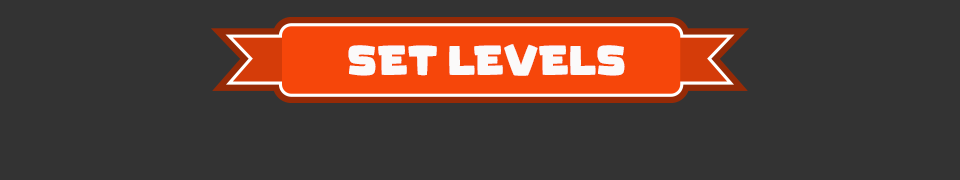
<style>
.page{position:relative;width:960px;height:180px;background:#333333}
.page>*{position:absolute;margin:0}
.t1{font:41.7px "KidGames";color:#fbfafa}
</style>
<div class="page">
<p class="t1" style="left:348px;top:44px;width:277px;height:32px">SET LEVELS</p>
</div>
